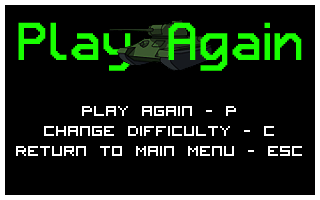
<style>
.page{position:relative;width:320px;height:200px;background:#000000}
.page>*{position:absolute;margin:0}
.t1{font:48px "Retron2000";color:#18ff00}
.t2{font:20px "VisitorTT1BRK";color:#ffffff}
</style>
<div class="page">
<p class="t1" style="left:18px;top:22px;width:113px;height:49px">Play</p>
<p class="t1" style="left:168px;top:22px;width:134px;height:49px">Again</p>
<p class="t2" style="left:82px;top:106px;width:154px;height:10px">Play Again - P</p>
<p class="t2" style="left:44px;top:126px;width:230px;height:10px">Change Difficulty - C</p>
<p class="t2" style="left:16px;top:146px;width:286px;height:10px">Return To Main Menu - ESC</p>
</div>
